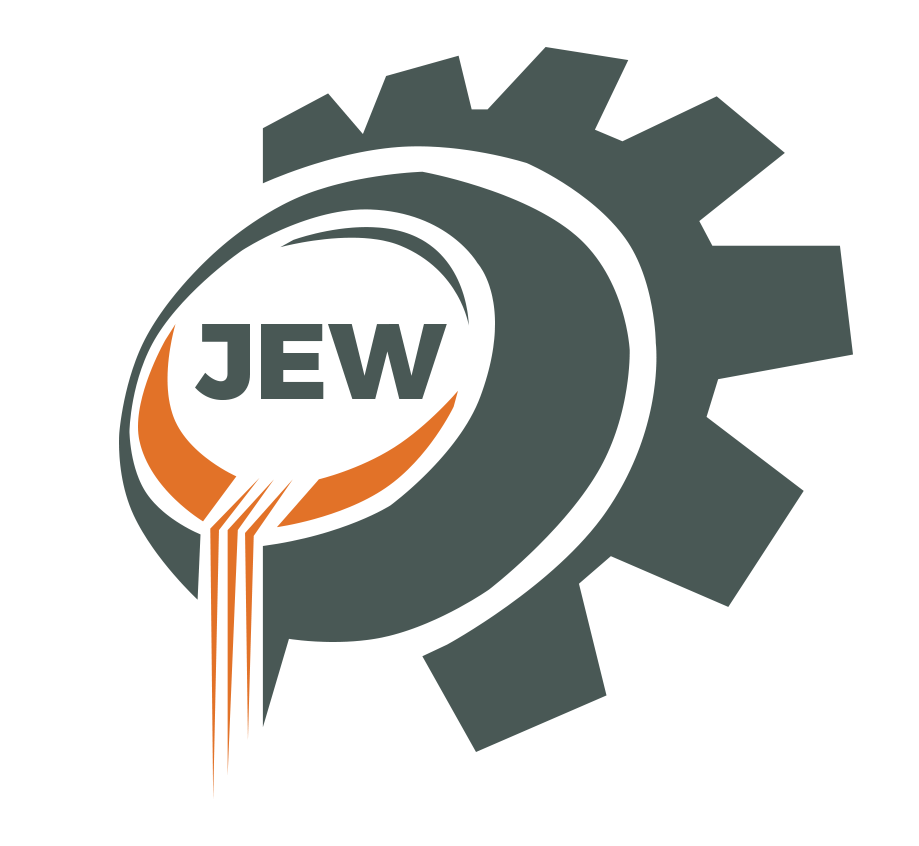
<style>
.page{position:relative;width:919px;height:846px;background:#ffffff}
.page>*{position:absolute;margin:0}
.t1{font:106.8px "Montserrat-ExtraBold";color:#495855}
</style>
<div class="page">
<p class="t1" style="left:195px;top:324px;width:252px;height:77px">JEW</p>
</div>
